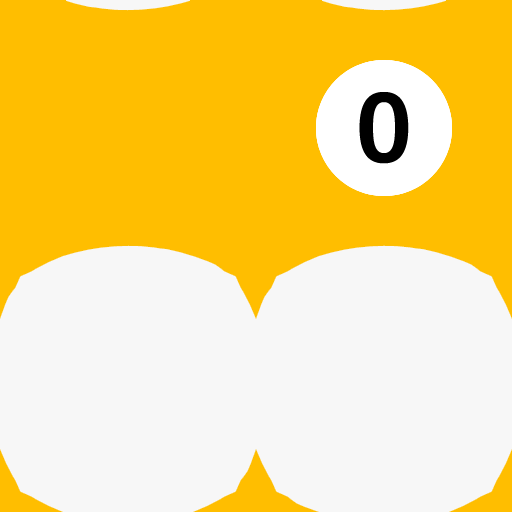
<style>
.page{position:relative;width:512px;height:512px;background:#f7f7f7}
.page>*{position:absolute;margin:0}
.t1{font:104px "Gautami-Bold";letter-spacing:-0.04em;color:#000000}
</style>
<div class="page">
<p class="t1" style="left:359px;top:92px;width:50px;height:72px">0</p>
</div>
